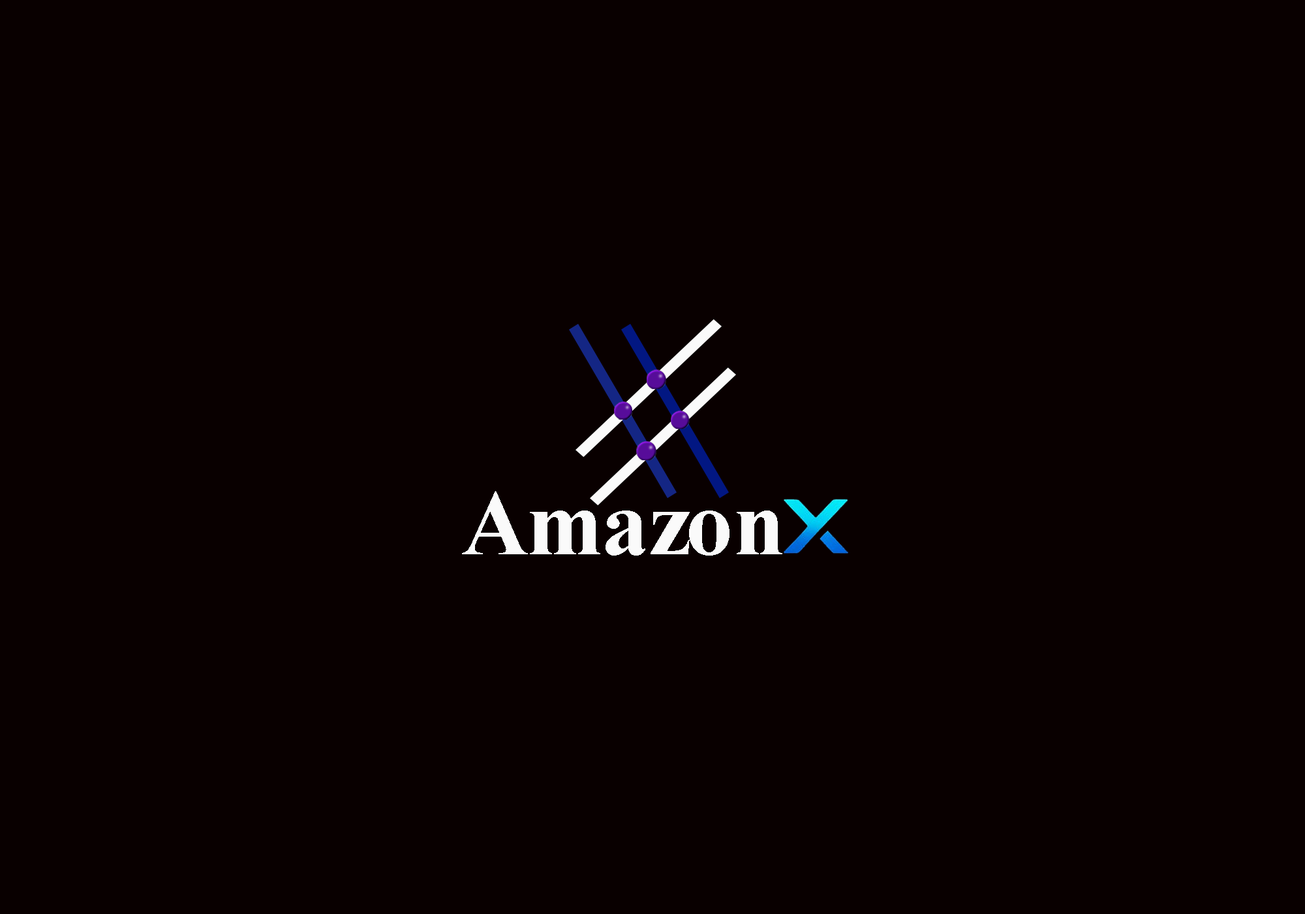
<style>
.page{position:relative;width:1305px;height:914px;background:#090000}
.page>*{position:absolute;margin:0}
.t1{font:94.1px "TimesNewRomanPS-BoldMT";color:#fafafa}
</style>
<div class="page">
<p class="t1" style="left:462px;top:491px;width:320px;height:64px">Amazon</p>
</div>
